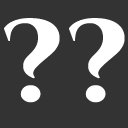
<style>
.page{position:relative;width:128px;height:128px;background:#333333}
.page>*{position:absolute;margin:0}
.t1{font:116px "CinzelDecorative-Bold";letter-spacing:0.025em;color:#ffffff;scale:1.15 1}
</style>
<div class="page">
<p class="t1" style="left:4px;top:18px;width:121px;height:85px">??</p>
</div>
